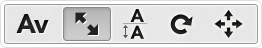
<style>
.page{position:relative;width:262px;height:48px}
.page>*{position:absolute;margin:0}
.t1{font:26.2px "AvenirLTStd-Black";color:#333333}
.t2{font:18.3px/16.8px "AvenirLTStd-Black";color:#1b1b1b}
</style>
<div class="page">
<p class="t1" style="left:16px;top:14px;width:33px;height:19px">Av</p>
<p class="t2" style="left:130px;top:9px;width:14px;height:30px">A<br>A</p>
</div>
